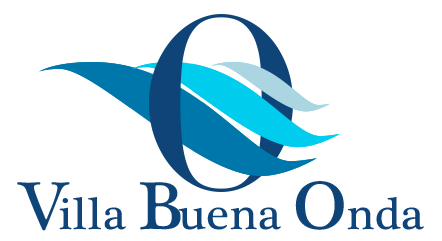
<style>
.page{position:relative;width:442px;height:241px;background:#ffffff}
.page>*{position:absolute;margin:0}
.t1{font:46.1px "PlantagenetCherokee";color:#0e4477;scale:1.03 1}
.t2{font:69.2px "PlantagenetCherokee";letter-spacing:-0.12em;color:#0e4477;scale:1.03 1}
.t3{font:69.2px "PlantagenetCherokee";letter-spacing:-0.06em;color:#0e4477;scale:1.03 1}
.t4{font:69.2px "PlantagenetCherokee";color:#0e4477;scale:1.03 1}
</style>
<div class="page">
<p class="t1" style="left:17px;top:181px;width:407px;height:50px"><span class="t2">V</span>illa <span class="t3">B</span>uena <span class="t4">O</span>nda</p>
</div>
